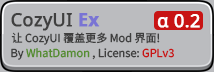
<style>
.page{position:relative;width:214px;height:72px;background:#bbbcbf}
.page>*{position:absolute;margin:0}
.t1{font:18px "NotoSans-Regular";color:#3f3f3f;font-weight:bold}
.t2{font:18px "NotoSans-Bold";color:#7974d4;font-weight:bold}
.t3{font:18px "NotoSans-Regular";color:#ffffff;font-weight:bold}
.t4{font:11px "NotoSansSC-Regular";color:#3f3f3f;font-weight:bold}
.t5{font:11px "NotoSansSC-Regular";color:#558d30;font-weight:bold}
.t6{font:11px "NotoSansSC-Regular";color:#c81414;font-weight:bold}
</style>
<div class="page">
<p class="t1" style="left:11px;top:13px;width:89px;height:18px">CozyUI <span class="t2">Ex</span></p>
<p class="t3" style="left:157px;top:14px;width:43px;height:14px">α 0.2</p>
<p class="t4" style="left:11px;top:32px;width:149px;height:13px">让 CozyUI 覆盖更多 Mod 界面!</p>
<p class="t4" style="left:11px;top:48px;width:163px;height:12px">By <span class="t5">WhatDamon</span> , License: <span class="t6">GPLv3</span></p>
</div>
